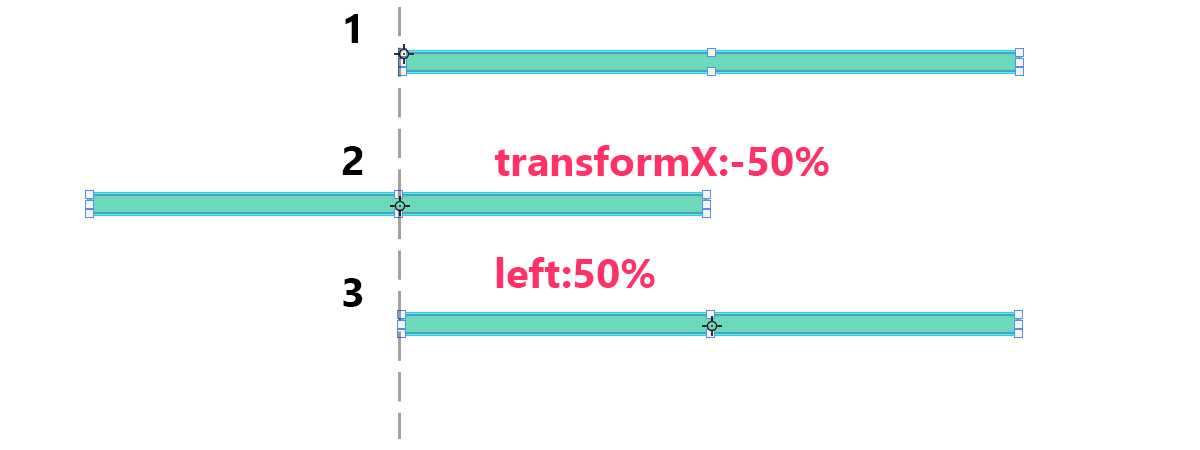
<style>
.page{position:relative;width:1200px;height:450px;background:#ffffff}
.page>*{position:absolute;margin:0}
.t1{font:42px/66px "Ebrima-Bold";color:#000000}
.t2{font:42px "Ebrima-Bold";color:#ff3267}
</style>
<div class="page">
<p class="t1" style="left:342px;top:14px;width:21px;height:293px">1<br><br>2<br><br>3</p>
<p class="t2" style="left:494px;top:145px;width:335px;height:31px">transformX:-50%</p>
<p class="t2" style="left:496px;top:257px;width:159px;height:31px">left:50%</p>
</div>
